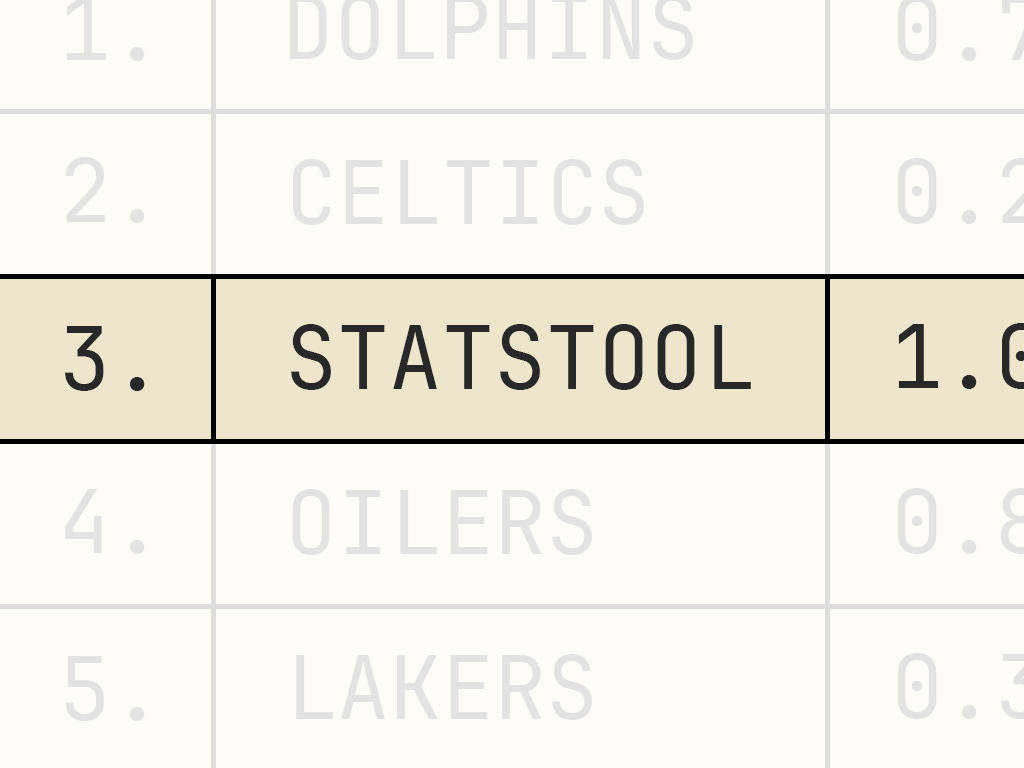
<style>
.page{position:relative;width:1024px;height:768px;background:#fdfcf8}
.page>*{position:absolute;margin:0}
.t1{font:87px "JetBrainsMono-Regular";color:#e3e3e3}
.t2{font:87px "JetBrainsMono-Regular";color:#282828}
</style>
<div class="page">
<p class="t1" style="left:65px;top:157px;width:80px;height:66px">2.</p>
<p class="t1" style="left:293px;top:159px;width:351px;height:66px">CELTICS</p>
<p class="t2" style="left:65px;top:326px;width:80px;height:65px">3.</p>
<p class="t2" style="left:291px;top:324px;width:460px;height:66px">STATSTOOL</p>
<p class="t1" style="left:65px;top:489px;width:80px;height:65px">4.</p>
<p class="t1" style="left:292px;top:489px;width:300px;height:66px">OILERS</p>
<p class="t1" style="left:296px;top:654px;width:296px;height:66px">LAKERS</p>
<p class="t1" style="left:65px;top:656px;width:80px;height:65px">5.</p>
</div>
